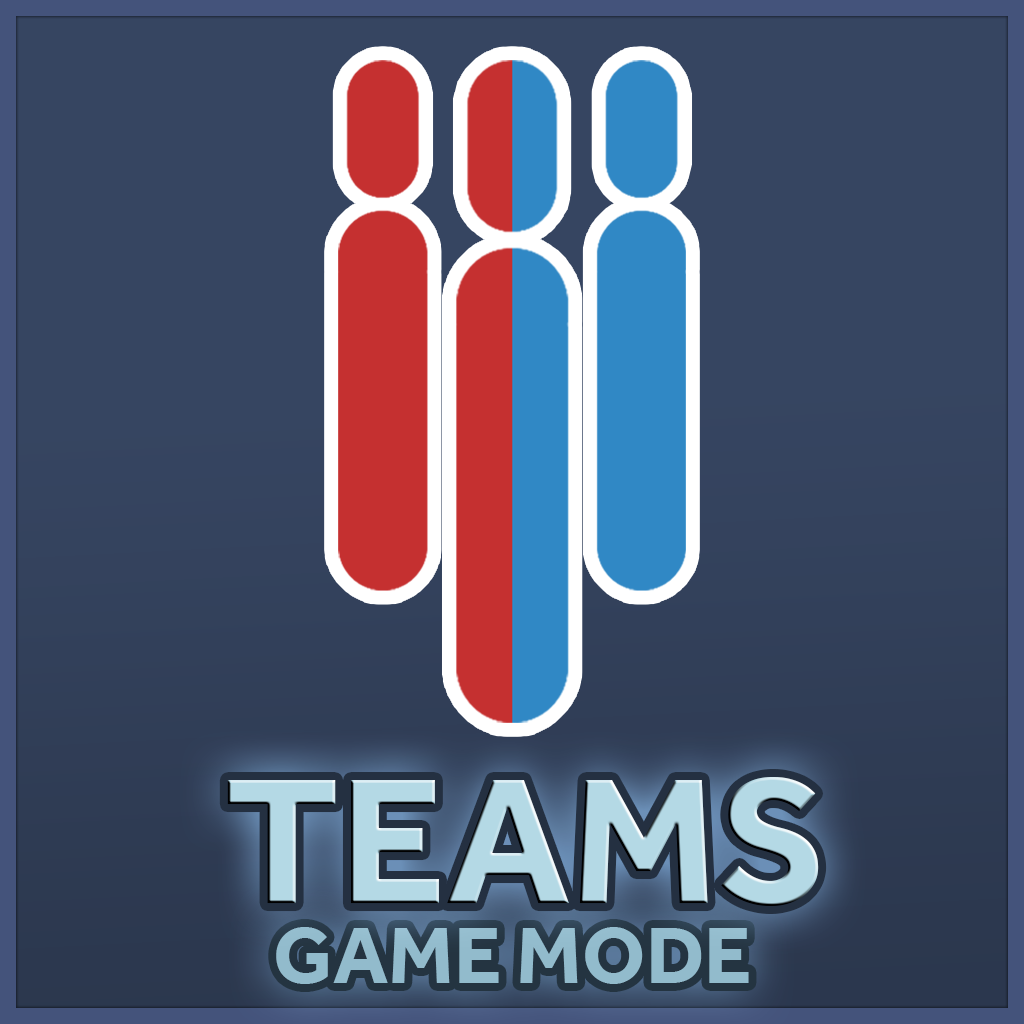
<style>
.page{position:relative;width:1024px;height:1024px;background:#364561}
.page>*{position:absolute;margin:0}
.t1{font:184.3px "Effra-Bold";color:#b4d9e5}
.t2{font:82.2px "Effra-Bold";color:#92bbcc}
</style>
<div class="page">
<p class="t1" style="left:227px;top:777px;width:592px;height:129px">TEAMS</p>
<p class="t2" style="left:276px;top:927px;width:473px;height:57px">GAME MODE</p>
</div>
